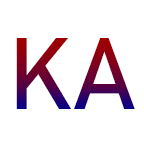
<style>
.page{position:relative;width:144px;height:144px;background:#ffffff}
.page>*{position:absolute;margin:0}
.t1{font:100px "Bahnschrift"}
</style>
<div class="page">
<p class="t1" style="left:16px;top:38px;width:119px;height:71px">KA</p>
</div>
